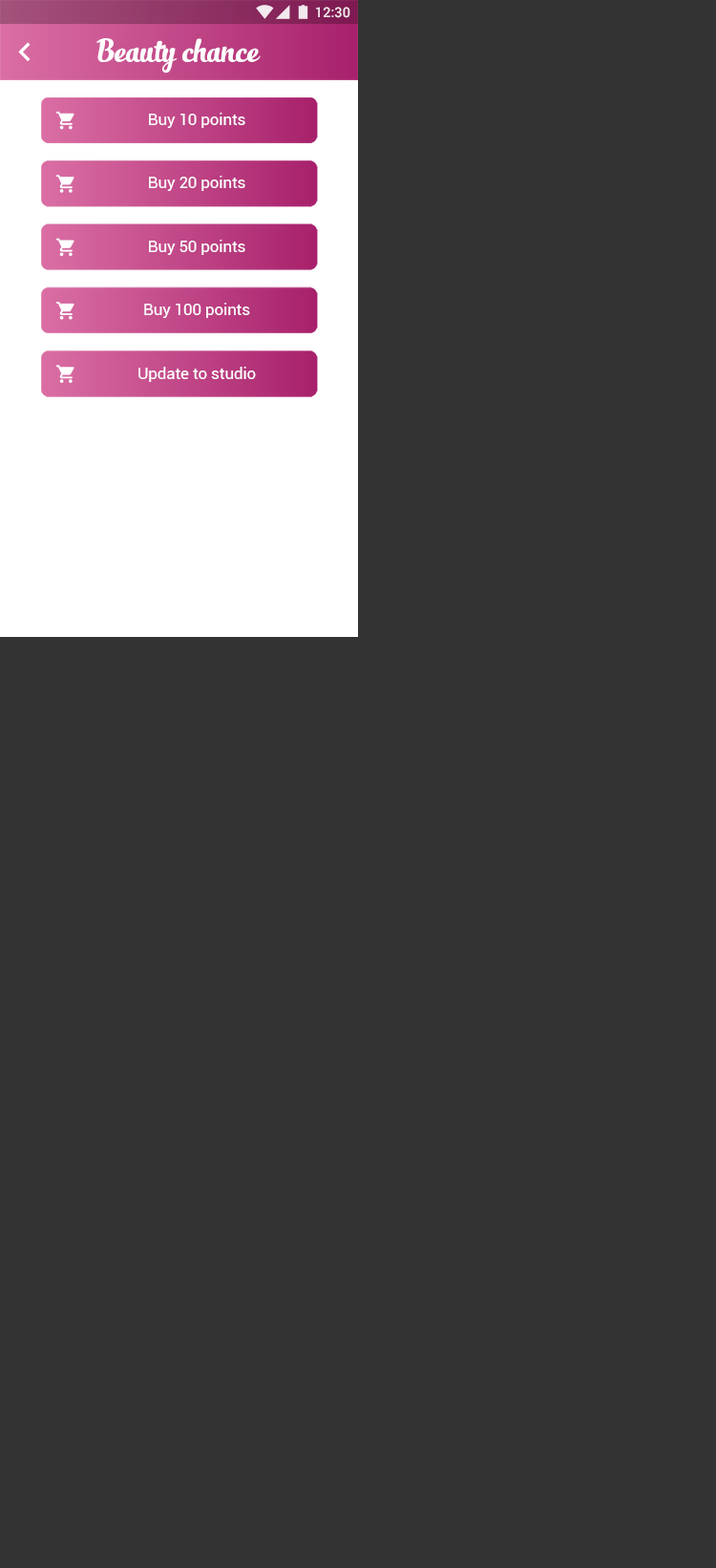
<style>
.page{position:relative;width:716px;height:1568px;background:#333333}
.page>*{position:absolute;margin:0}
.t1{font:13.9px "Roboto-Medium";color:#ffffff}
.t2{font:23.9px "SlimTony-Italic";color:#ffffff}
.t3{font:15.9px "Roboto-Regular";color:#ffffff}
</style>
<div class="page">
<p class="t1" style="left:316px;top:7px;width:34px;height:11px">12:30</p>
<p class="t2" style="left:96px;top:38px;width:165px;height:36px">Beauty chance</p>
<p class="t3" style="left:149px;top:113px;width:96px;height:15px">Buy 10 points</p>
<p class="t3" style="left:149px;top:176px;width:96px;height:15px">Buy 20 points</p>
<p class="t3" style="left:149px;top:240px;width:96px;height:15px">Buy 50 points</p>
<p class="t3" style="left:144px;top:303px;width:106px;height:15px">Buy 100 points</p>
<p class="t3" style="left:138px;top:367px;width:118px;height:15px">Update to studio</p>
</div>
